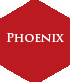
<style>
.page{position:relative;width:70px;height:82px;background:#bc1a21}
.page>*{position:absolute;margin:0}
.t1{font:12px "TrajanPro-Bold";color:#ffffff}
</style>
<div class="page">
<p class="t1" style="left:6px;top:33px;width:58px;height:9px">Phoenix</p>
</div>
